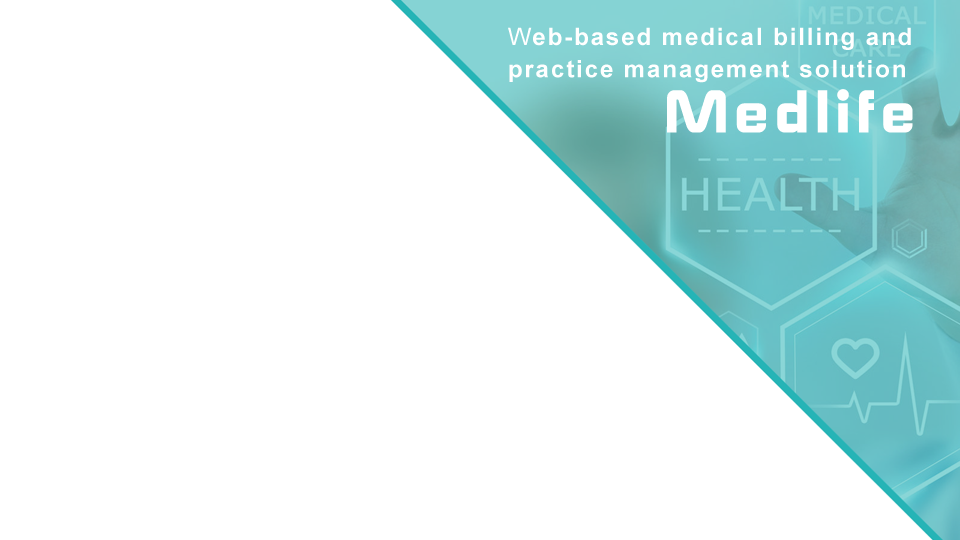
<style>
.page{position:relative;width:960px;height:540px;background:#ffffff}
.page>*{position:absolute;margin:0}
.t1{font:24px/32.1px "Arial-BoldMT";letter-spacing:0.08em;color:#ffffff}
.t2{font:24px/32.1px "ArialMT";letter-spacing:0.08em;color:#ffffff}
.t3{font:63.7px "E-SQUARE";letter-spacing:0.08em;color:#ffffff}
</style>
<div class="page">
<p class="t1" style="left:508px;top:27px;width:403px;height:56px"><span class="t2">W</span>eb-based medical billing and practice management solution</p>
<p class="t3" style="left:667px;top:89px;width:246px;height:44px">Medlife</p>
</div>
